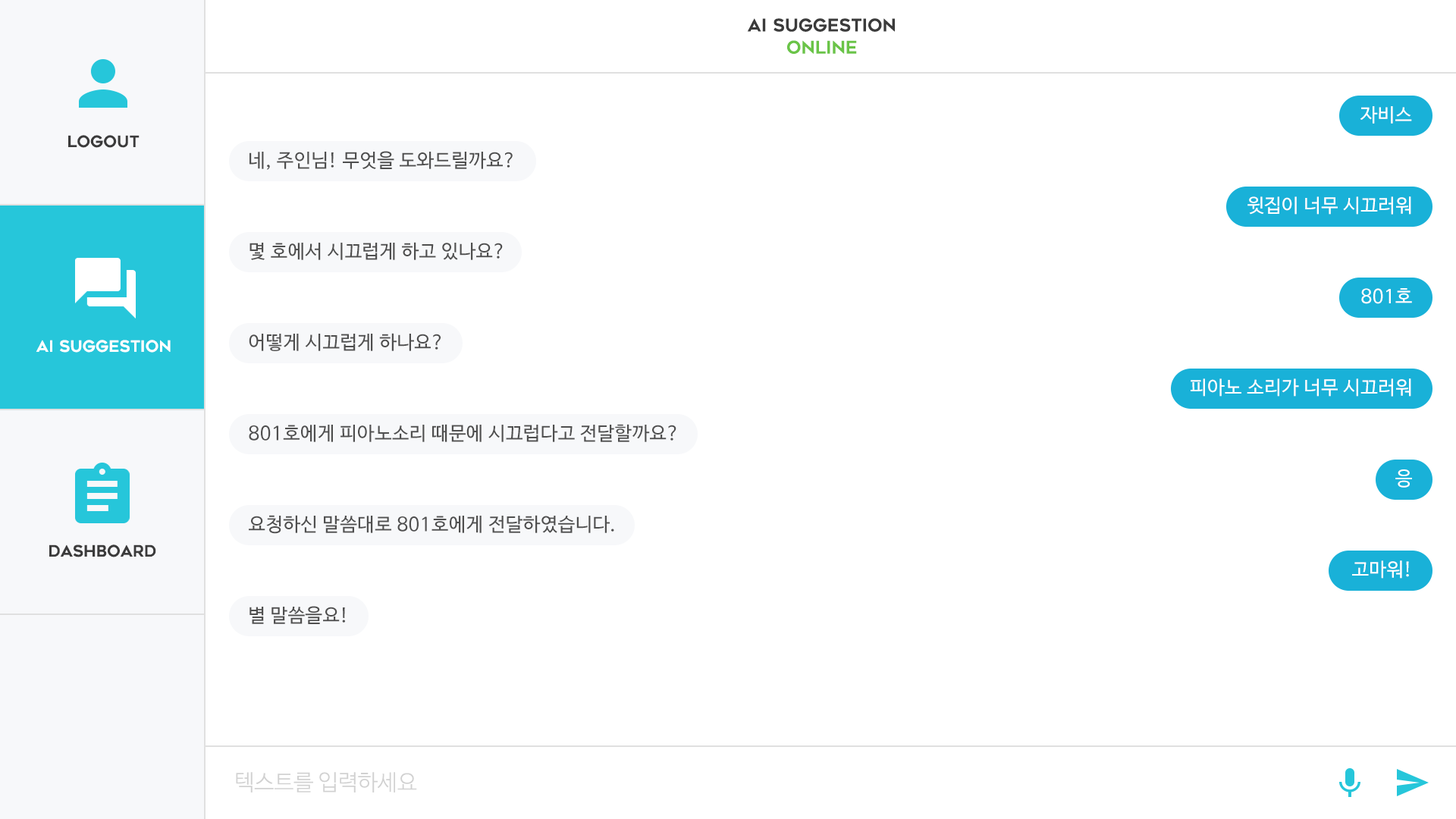
<style>
.page{position:relative;width:1456px;height:819px;background:#ffffff}
.page>*{position:absolute;margin:0}
.t1{font:17.4px/22.1px "Geometos";color:#3b3b3b}
.t2{font:17.4px/22.1px "Geometos";color:#6ac447}
.t3{font:19px "NanumBarunGothic";letter-spacing:0.025em;color:#ffffff}
.t4{font:15.8px "Geometos";color:#3b3b3b}
.t5{font:19px "NanumBarunGothic";letter-spacing:0.025em;color:#4f4f4f}
.t6{font:15.8px "Geometos";color:#ffffff}
.t7{font:22.1px "NanumBarunGothicLight";color:#d1d1d1}
</style>
<div class="page">
<p class="t1" style="left:747px;top:18px;width:148px;height:36px;text-align:center">ai suggestion<br><span class="t2">online</span></p>
<p class="t3" style="left:1360px;top:106px;width:52px;height:18px">자비스</p>
<p class="t4" style="left:68px;top:135px;width:72px;height:13px">logout</p>
<p class="t5" style="left:249px;top:151px;width:264px;height:19px">네, 주인님! 무엇을 도와드릴까요?</p>
<p class="t3" style="left:1247px;top:196px;width:164px;height:19px">윗집이 너무 시끄러워</p>
<p class="t5" style="left:249px;top:242px;width:254px;height:18px">몇 호에서 시끄럽게 하고 있나요?</p>
<p class="t3" style="left:1361px;top:288px;width:51px;height:16px">801호</p>
<p class="t6" style="left:36px;top:340px;width:135px;height:13px">AI Suggestion</p>
<p class="t5" style="left:249px;top:333px;width:192px;height:18px">어떻게 시끄럽게 하나요?</p>
<p class="t3" style="left:1191px;top:378px;width:220px;height:19px">피아노 소리가 너무 시끄러워</p>
<p class="t5" style="left:249px;top:424px;width:427px;height:18px">801호에게 피아노소리 때문에 시끄럽다고 전달할까요?</p>
<p class="t3" style="left:1395px;top:469px;width:17px;height:19px">응</p>
<p class="t5" style="left:249px;top:515px;width:365px;height:19px">요청하신 말씀대로 801호에게 전달하였습니다.</p>
<p class="t4" style="left:49px;top:544px;width:107px;height:13px">dashboard</p>
<p class="t3" style="left:1352px;top:560px;width:57px;height:19px">고마워!</p>
<p class="t5" style="left:249px;top:606px;width:96px;height:18px">별 말씀을요!</p>
<p class="t7" style="left:236px;top:772px;width:181px;height:20px">텍스트를 입력하세요</p>
</div>
